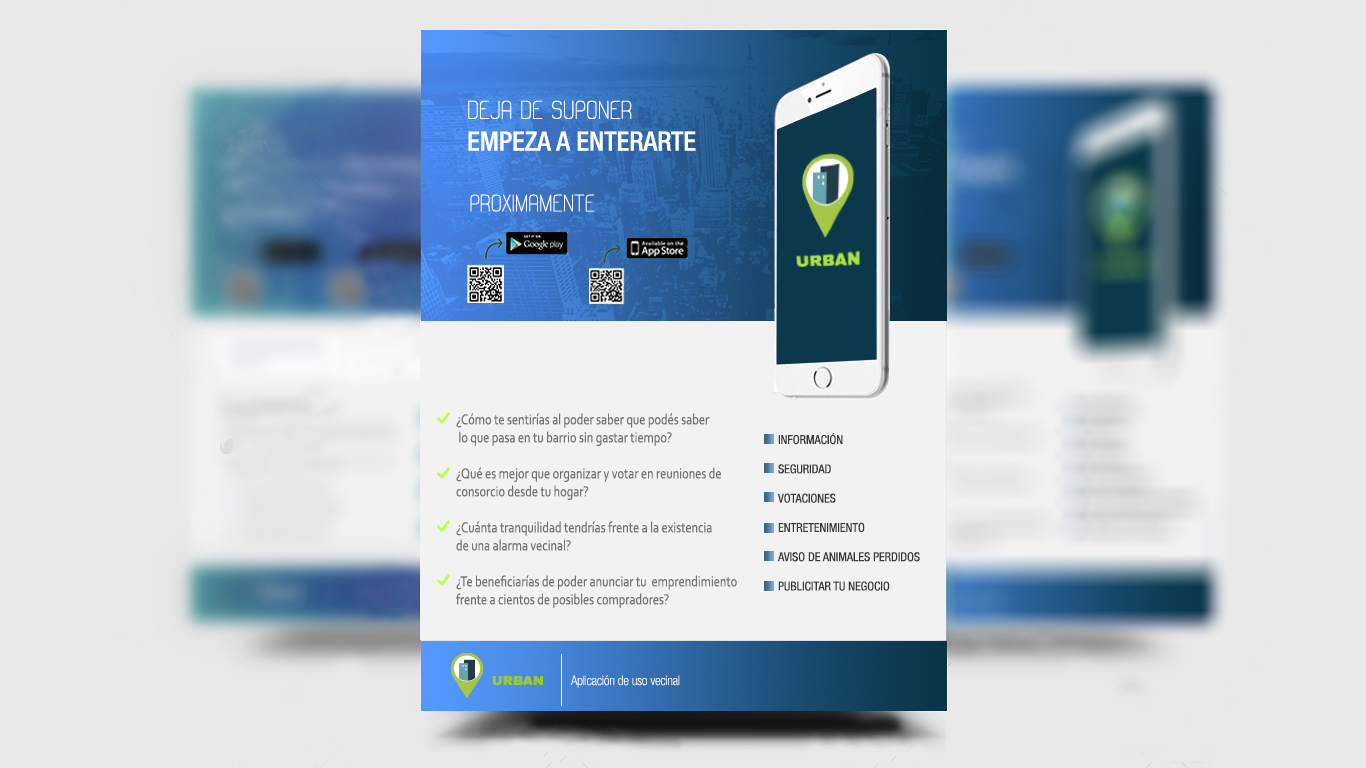
<style>
.page{position:relative;width:1366px;height:768px;background:#e8e8e8}
.page>*{position:absolute;margin:0}
.t1{font:26.5px "HelveticaNeueLTStd-MdCn";color:#ffffff}
.t2{font:25.6px "ACLine";color:#ffffff}
.t3{font:24px "ACLine";color:#ffffff}
.t4{font:15px "Corbel";color:#707070;scale:0.82 1}
.t5{font:12.2px "HelveticaNeueLTStd-Cn";color:#393737}
.t6{font:13.1px "ArchivoBlack-Regular";color:#9ac836}
.t7{font:13.1px "HelveticaNeueLTStd-ThCn";color:#ffffff}
</style>
<div class="page">
<p class="t1" style="left:468px;top:100px;width:228px;height:51px"><span class="t2">DEJA DE SUPONER<br></span>EMPEZA A ENTERARTE</p>
<p class="t3" style="left:470px;top:194px;width:125px;height:18px">proximamente</p>
<p class="t4" style="left:456px;top:413px;width:281px;height:195px">¿Cómo te sentirías al poder saber que podés saber<br> lo que pasa en tu barrio sin gastar tiempo?<br><br>¿Qué es mejor que organizar y votar en reuniones de <br>consorcio desde tu hogar?<br><br>¿Cuánta tranquilidad tendrías frente a la existencia <br>de una alarma vecinal?<br><br>¿Te beneficiarías de poder anunciar tu  emprendimiento <br>frente a cientos de posibles compradores?</p>
<p class="t5" style="left:777px;top:433px;width:143px;height:158px">INFORMACIÓN<br><br>SEGURIDAD<br><br>VOTACIONES<br><br>ENTRETENIMIENTO<br><br>AVISO DE ANIMALES PERDIDOS<br><br>PUBLICITAR TU NEGOCIO</p>
<p class="t6" style="left:492px;top:676px;width:51px;height:10px">URBAN</p>
<p class="t7" style="left:570px;top:675px;width:110px;height:13px">Aplicación de uso vecinal</p>
</div>
